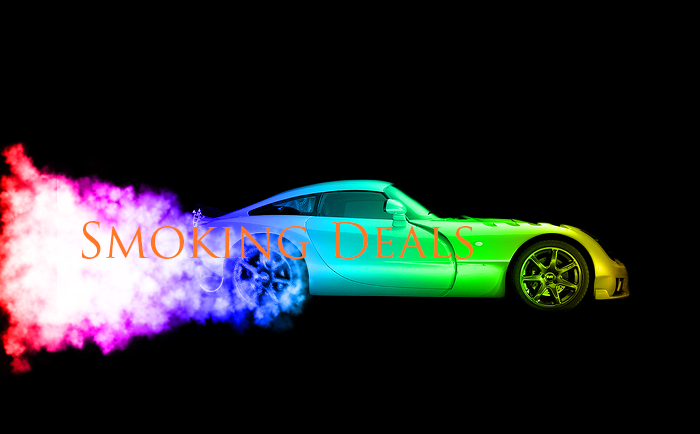
<style>
.page{position:relative;width:700px;height:434px;background:#000000}
.page>*{position:absolute;margin:0}
.t1{font:48px "TrajanPro-Regular";color:#ff7624}
</style>
<div class="page">
<p class="t1" style="left:82px;top:221px;width:391px;height:38px">Smoking Deals</p>
</div>
